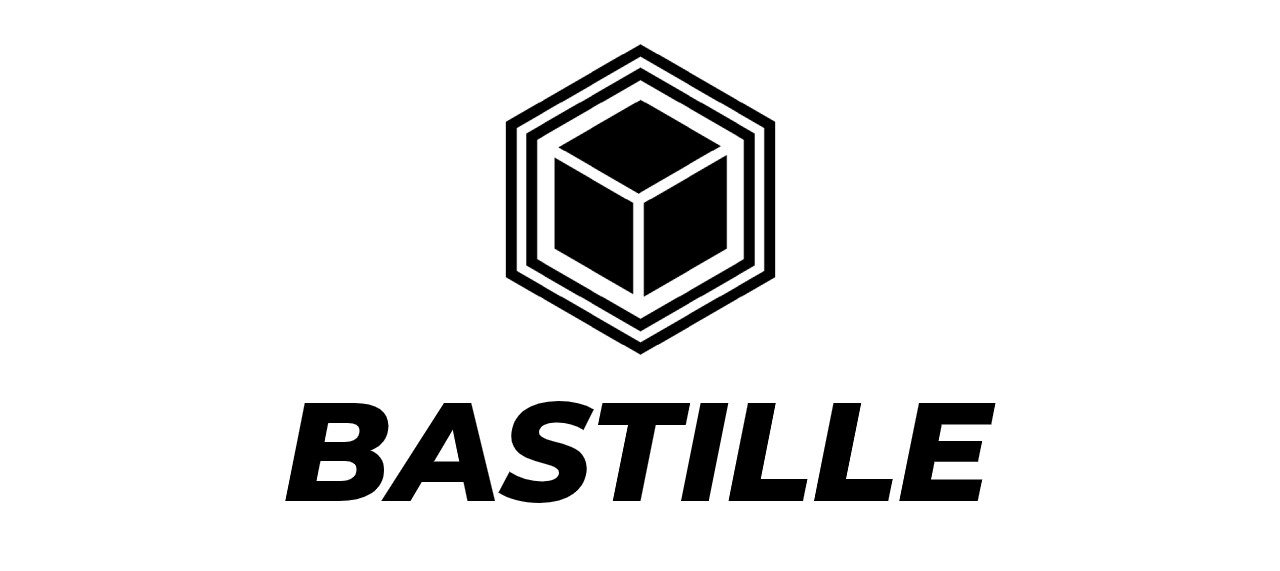
<style>
.page{position:relative;width:1280px;height:571px;background:#ffffff}
.page>*{position:absolute;margin:0}
.t1{font:140px "Montserrat-ExtraBoldItalic";color:#000000}
</style>
<div class="page">
<p class="t1" style="left:285px;top:401px;width:711px;height:102px">BASTILLE</p>
</div>
